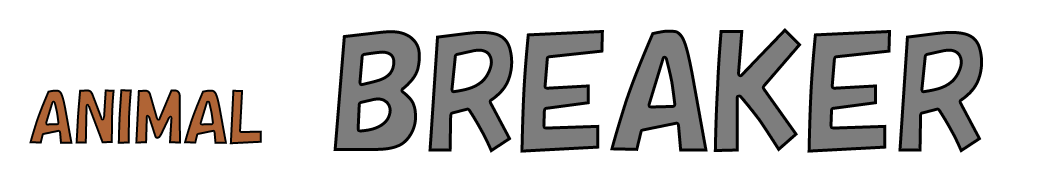
<style>
.page{position:relative;width:1058px;height:179px;background:#ffffff}
.page>*{position:absolute;margin:0}
.t1{font:150px "HGSSoeiKakupoptai";color:#7d7d7d}
.t2{font:66.7px "HGSSoeiKakupoptai";color:#b06435}
</style>
<div class="page">
<p class="t1" style="left:333px;top:28px;width:650px;height:125px">BREAKER</p>
<p class="t2" style="left:29px;top:89px;width:233px;height:56px">ANIMAL</p>
</div>
